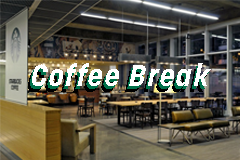
<style>
.page{position:relative;width:240px;height:160px}
.page>*{position:absolute;margin:0}
.t1{font:30px "Korolev-BoldItalic";letter-spacing:0.05em;color:#ffffff}
</style>
<div class="page">
<p class="t1" style="left:32px;top:63px;width:179px;height:23px">Coffee Break</p>
</div>
